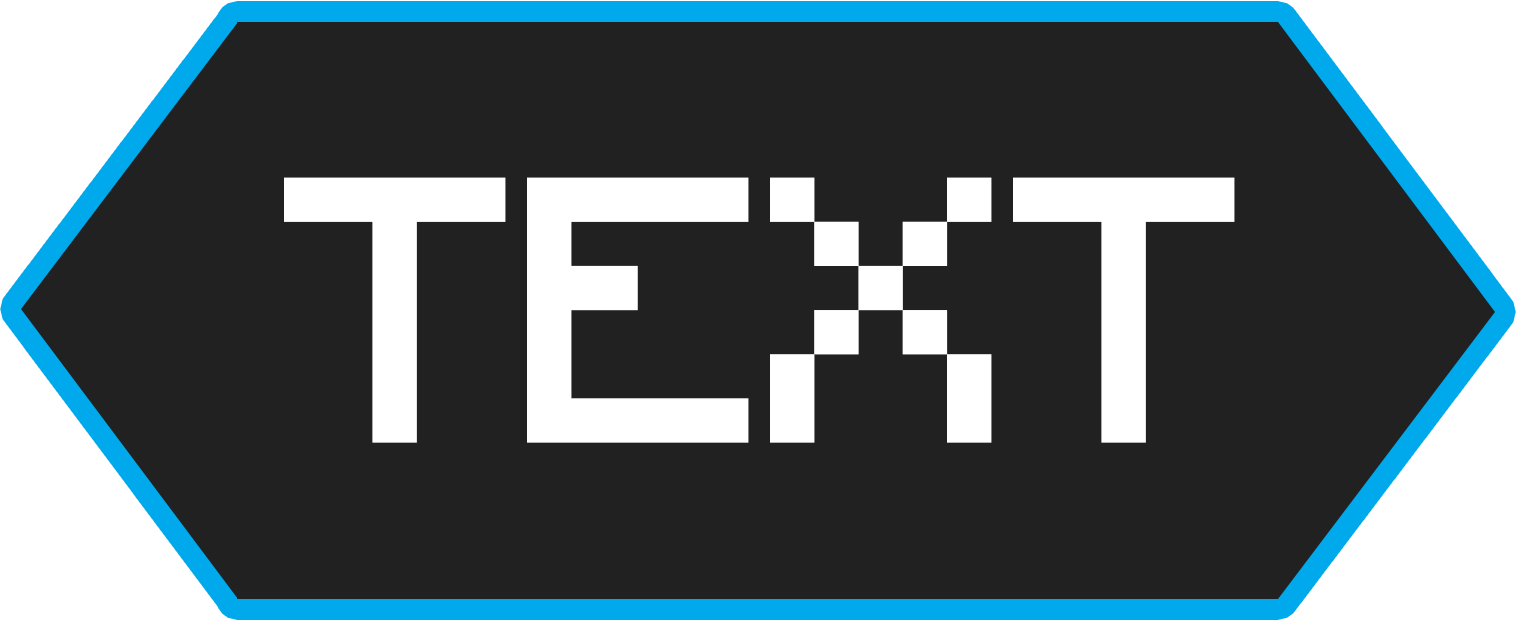
<style>
.page{position:relative;width:1516px;height:621px;background:#212121}
.page>*{position:absolute;margin:0}
.t1{font:353.3px "Minecraft";color:#ffffff}
</style>
<div class="page">
<p class="t1" style="left:284px;top:177px;width:951px;height:266px">TEXT</p>
</div>
